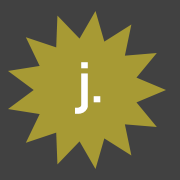
<style>
.page{position:relative;width:180px;height:180px;background:#414141}
.page>*{position:absolute;margin:0}
.t1{font:64px "Proletarian";color:#ffffff;scale:1.1 1}
</style>
<div class="page">
<p class="t1" style="left:75px;top:62px;width:26px;height:52px">j.</p>
</div>
